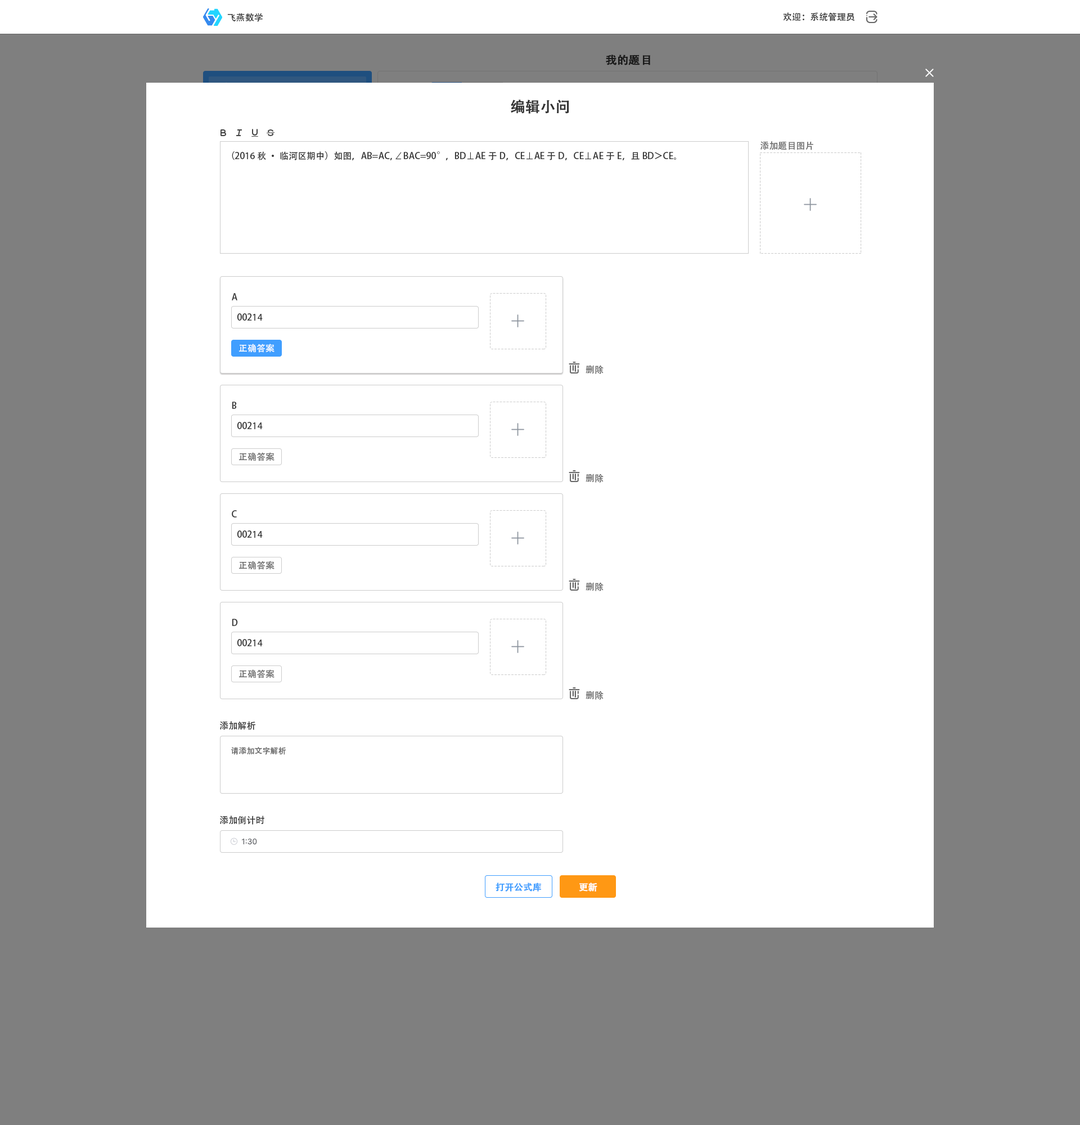
<style>
.page{position:relative;width:1080px;height:1125px;background:#ffffff}
.page>*{position:absolute;margin:0}
.t1{font:9px "AdobeHeitiStd-Regular";color:#333333}
.t2{font:11.2px "AdobeHeitiStd-Regular";color:#191919;font-weight:bold}
.t3{font:14.6px "AdobeHeitiStd-Regular";color:#333333;font-weight:bold}
.t4{font:9px "AdobeHeitiStd-Regular";color:#666666}
.t5{font:9px "AdobeHeitiStd-Regular";color:#ffffff}
.t6{font:7.9px "AdobeHeitiStd-Regular";color:#666666}
.t7{font:9px "AdobeHeitiStd-Regular";color:#409eff;font-weight:bold}
.t8{font:9px "AdobeHeitiStd-Regular";color:#ffffff;font-weight:bold}
</style>
<div class="page">
<p class="t1" style="left:227px;top:13px;width:36px;height:9px">飞燕数学</p>
<p class="t1" style="left:783px;top:12px;width:72px;height:9px">欢迎：系统管理员</p>
<p class="t2" style="left:606px;top:55px;width:44px;height:10px">我的题目</p>
<p class="t3" style="left:511px;top:100px;width:58px;height:14px">编辑小问</p>
<p class="t4" style="left:760px;top:141px;width:53px;height:9px">添加题目图片</p>
<p class="t1" style="left:232px;top:151px;width:444px;height:9px">（2016秋·临河区期中）如图，AB=AC，∠BAC=90°，BD⊥AE于D，CE⊥AE于D，CE⊥AE于E，且BD＞CE。</p>
<p class="t1" style="left:232px;top:293px;width:5px;height:7px">A</p>
<p class="t1" style="left:237px;top:313px;width:26px;height:8px">00214</p>
<p class="t5" style="left:239px;top:344px;width:35px;height:9px">正确答案</p>
<p class="t4" style="left:586px;top:365px;width:18px;height:9px">删除</p>
<p class="t1" style="left:232px;top:402px;width:5px;height:7px">B</p>
<p class="t1" style="left:237px;top:422px;width:26px;height:7px">00214</p>
<p class="t4" style="left:239px;top:452px;width:35px;height:9px">正确答案</p>
<p class="t4" style="left:586px;top:474px;width:18px;height:9px">删除</p>
<p class="t1" style="left:232px;top:510px;width:5px;height:8px">C</p>
<p class="t1" style="left:237px;top:530px;width:26px;height:8px">00214</p>
<p class="t4" style="left:239px;top:561px;width:35px;height:9px">正确答案</p>
<p class="t4" style="left:586px;top:582px;width:18px;height:9px">删除</p>
<p class="t1" style="left:232px;top:619px;width:6px;height:7px">D</p>
<p class="t1" style="left:237px;top:639px;width:26px;height:7px">00214</p>
<p class="t4" style="left:239px;top:669px;width:35px;height:9px">正确答案</p>
<p class="t4" style="left:586px;top:691px;width:18px;height:9px">删除</p>
<p class="t1" style="left:220px;top:721px;width:35px;height:9px">添加解析</p>
<p class="t6" style="left:231px;top:747px;width:55px;height:8px">请添加文字解析</p>
<p class="t1" style="left:220px;top:816px;width:44px;height:9px">添加倒计时</p>
<p class="t7" style="left:496px;top:883px;width:45px;height:9px">打开公式库</p>
<p class="t8" style="left:579px;top:883px;width:18px;height:9px">更新</p>
</div>
